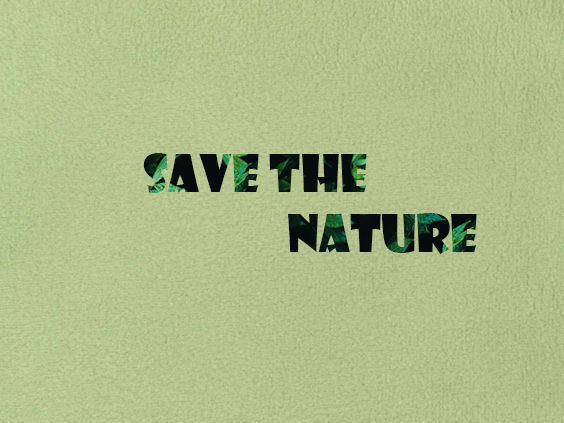
<style>
.page{position:relative;width:564px;height:423px}
.page>*{position:absolute;margin:0}
.t1{font:50px "ShowcardGothic-Reg"}
</style>
<div class="page">
<p class="t1" style="left:143px;top:153px;width:334px;height:101px">Save the<br>    Nature</p>
</div>
